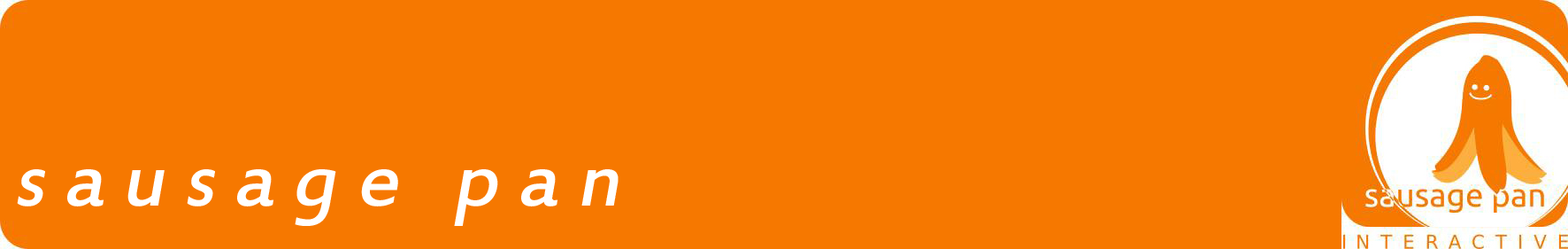
<style>
.page{position:relative;width:1568px;height:249px;background:#f67800}
.page>*{position:absolute;margin:0}
.t1{font:88.5px "EstrangeloEdessa";letter-spacing:0.2em;color:#ffffff;font-style:italic}
</style>
<div class="page">
<p class="t1" style="left:17px;top:169px;width:602px;height:57px">sausage pan</p>
</div>
